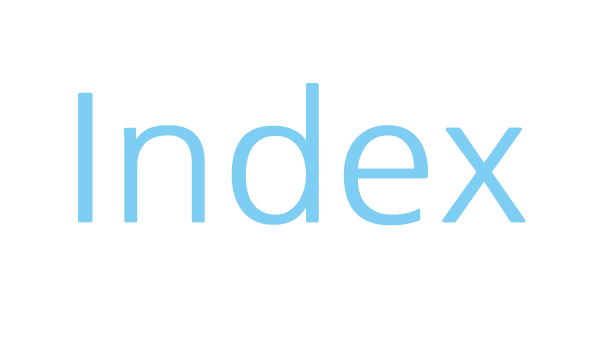
<style>
.page{position:relative;width:600px;height:337px;background:#ffffff}
.page>*{position:absolute;margin:0}
.t1{font:175.5px "NanumGothic";color:#7ecef4;scale:1.07 1}
</style>
<div class="page">
<p class="t1" style="left:78px;top:83px;width:448px;height:143px">Index</p>
</div>
